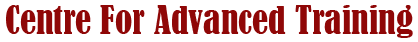
<style>
.page{position:relative;width:418px;height:42px;background:#ffffff}
.page>*{position:absolute;margin:0}
.t1{font:36px "BernardMT-Condensed";color:#8f0707}
</style>
<div class="page">
<p class="t1" style="left:6px;top:5px;width:407px;height:33px">Centre For Advanced Training</p>
</div>
